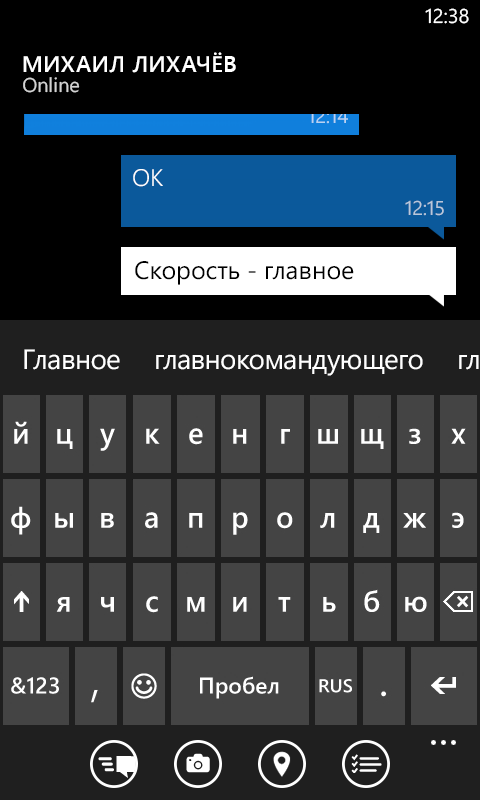
<style>
.page{position:relative;width:480px;height:800px;background:#444444}
.page>*{position:absolute;margin:0}
.t1{font:20px "SegoeWP";color:#ffffff}
.t2{font:24px "SegoeWP-SemiLight";letter-spacing:-0.015em;color:#ffffff}
.t3{font:22.7px "SegoeWP-Semibold";letter-spacing:0.025em;color:#ffffff;text-transform:uppercase}
.t4{font:25.3px "SegoeWP";letter-spacing:-0.005em;color:#000000}
.t5{font:28px "SegoeWP";letter-spacing:-0.025em;color:#ffffff}
</style>
<div class="page">
<p class="t1" style="left:425px;top:8px;width:44px;height:16px">12:38</p>
<p class="t2" style="left:35px;top:19px;width:308px;height:81px">Сообщения - важнее всего;<br>вопрос: что важнее, внешний<br>вид или скорость?</p>
<p class="t3" style="left:23px;top:52px;width:213px;height:21px">Михаил ЛихачёВ</p>
<p class="t2" style="left:133px;top:169px;width:30px;height:18px">ОК</p>
<p class="t4" style="left:135px;top:261px;width:219px;height:24px">Скорость - главное</p>
<p class="t5" style="left:24px;top:349px;width:96px;height:21px">Главное</p>
<p class="t5" style="left:156px;top:354px;width:267px;height:22px">главнокомандующего</p>
</div>
